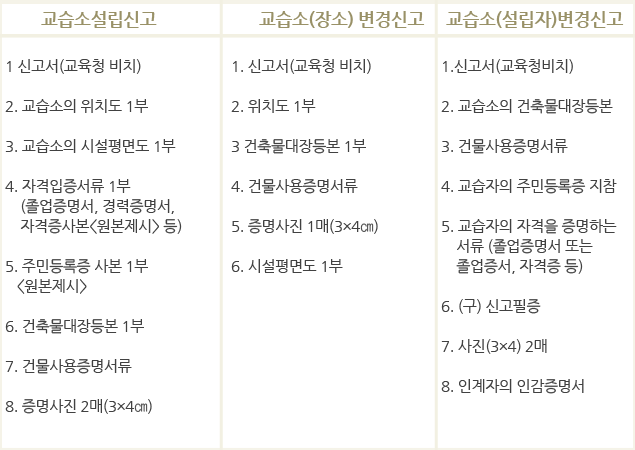
<style>
.page{position:relative;width:635px;height:450px;background:#ffffff}
.page>*{position:absolute;margin:0}
.t1{font:18px "NanumGothicBold";letter-spacing:-0.025em;color:#999167}
.t2{font:15px/20px "NanumGothic";letter-spacing:-0.025em;color:#414141}
</style>
<div class="page">
<p class="t1" style="left:41px;top:11px;width:116px;height:17px">교습소설립신고</p>
<p class="t1" style="left:259px;top:11px;width:166px;height:17px">교습소(장소) 변경신고</p>
<p class="t1" style="left:446px;top:11px;width:178px;height:17px">교습소(설립자)변경신고</p>
<p class="t2" style="left:5px;top:59px;width:177px;height:355px">1 신고서(교육청 비치) <br><br>2. 교습소의 위치도 1부 <br><br>3. 교습소의 시설평면도 1부 <br><br>4. 자격입증서류 1부<br>    (졸업증명서, 경력증명서, <br>    자격증사본&lt;원본제시&gt; 등) <br><br>5. 주민등록증 사본 1부<br>   &lt;원본제시&gt; <br><br>6. 건축물대장등본 1부 <br><br>7. 건물사용증명서류 <br><br>8. 증명사진 2매(3×4㎝)</p>
<p class="t2" style="left:231px;top:59px;width:147px;height:214px">1. 신고서(교육청 비치) <br><br>2. 위치도 1부 <br><br>3 건축물대장등본 1부 <br><br>4. 건물사용증명서류 <br><br>5. 증명사진 1매(3×4㎝) <br><br>6. 시설평면도 1부</p>
<p class="t2" style="left:441px;top:59px;width:176px;height:335px">1.신고서(교육청비치) <br><br>2. 교습소의 건축물대장등본 <br><br>3. 건물사용증명서류 <br><br>4. 교습자의 주민등록증 지참 <br><br>5. 교습자의 자격을 증명하는<br>    서류 (졸업증명서 또는<br>    졸업증서, 자격증 등) <br><br>6. (구) 신고필증 <br><br>7. 사진(3×4) 2매 <br><br>8. 인계자의 인감증명서</p>
</div>
